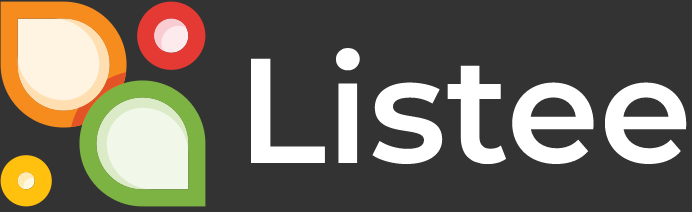
<style>
.page{position:relative;width:692px;height:212px;background:#333333}
.page>*{position:absolute;margin:0}
.t1{font:149px "Montserrat-SemiBold";color:#ffffff}
</style>
<div class="page">
<p class="t1" style="left:251px;top:47px;width:436px;height:118px">Listee</p>
</div>
